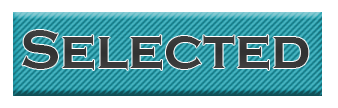
<style>
.page{position:relative;width:338px;height:108px;background:#ffffff}
.page>*{position:absolute;margin:0}
.t1{font:55.9px "CopperplateGothic-Bold";color:#3a3a3a}
</style>
<div class="page">
<p class="t1" style="left:22px;top:30px;width:287px;height:40px">Selected</p>
</div>
